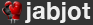
<style>
.page{position:relative;width:93px;height:25px;background:#333333}
.page>*{position:absolute;margin:0}
.t1{font:24px "HelveticaNeue-Bold";color:#efefef}
</style>
<div class="page">
<p class="t1" style="left:25px;top:2px;width:66px;height:21px">jabjot</p>
</div>
